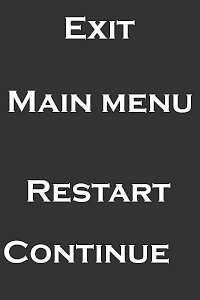
<style>
.page{position:relative;width:200px;height:300px;background:#333333}
.page>*{position:absolute;margin:0}
.t1{font:32px "CopperplateGothic-Bold";color:#ffffff}
</style>
<div class="page">
<p class="t1" style="left:65px;top:16px;width:70px;height:24px">Exit</p>
<p class="t1" style="left:8px;top:90px;width:184px;height:23px">Main menu</p>
<p class="t1" style="left:27px;top:180px;width:144px;height:23px">Restart</p>
<p class="t1" style="left:4px;top:240px;width:165px;height:24px">Continue</p>
</div>
